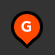
<style>
.page{position:relative;width:55px;height:55px;background:#333333}
.page>*{position:absolute;margin:0}
.t1{font:14px "Avenir-Heavy";color:#ffffff}
</style>
<div class="page">
<p class="t1" style="left:21px;top:21px;width:10px;height:11px">G</p>
</div>
